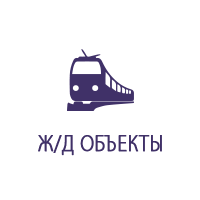
<style>
.page{position:relative;width:200px;height:200px;background:#ffffff}
.page>*{position:absolute;margin:0}
.t1{font:23.9px "MyriadPro-Light";letter-spacing:0.025em;color:#403168;font-variant:small-caps;font-weight:bold;scale:0.83 1}
</style>
<div class="page">
<p class="t1" style="left:38px;top:135px;width:124px;height:21px">Ж/Д ОБЪЕКТЫ</p>
</div>
